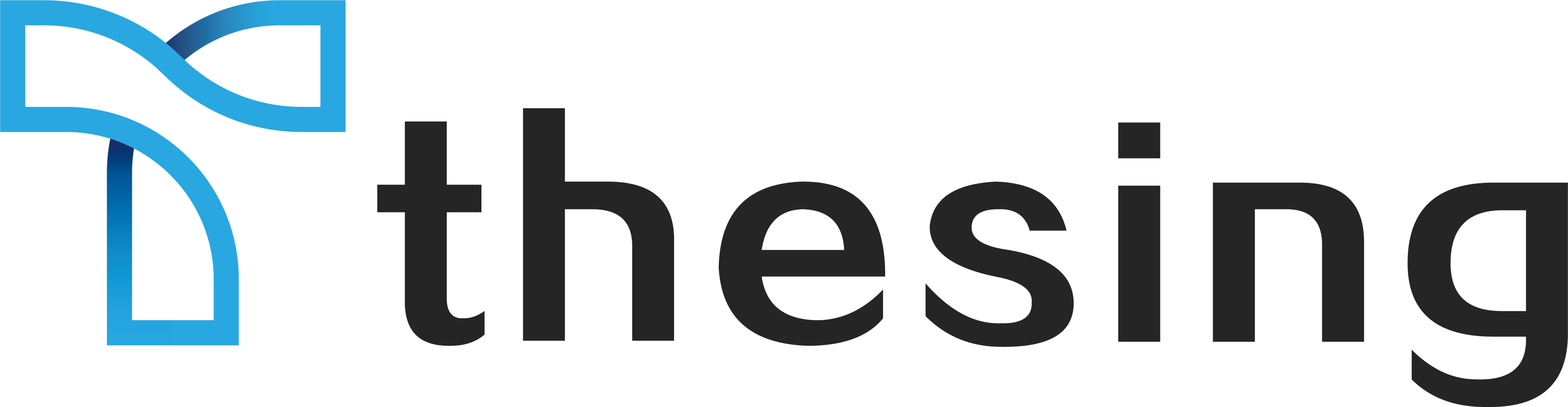
<style>
.page{position:relative;width:1568px;height:407px;background:#ffffff}
.page>*{position:absolute;margin:0}
.t1{font:261.2px "FZZCHJW--GB1-0";letter-spacing:0.05em;color:#252525}
</style>
<div class="page">
<p class="t1" style="left:377px;top:108px;width:1191px;height:299px">thesing</p>
</div>
